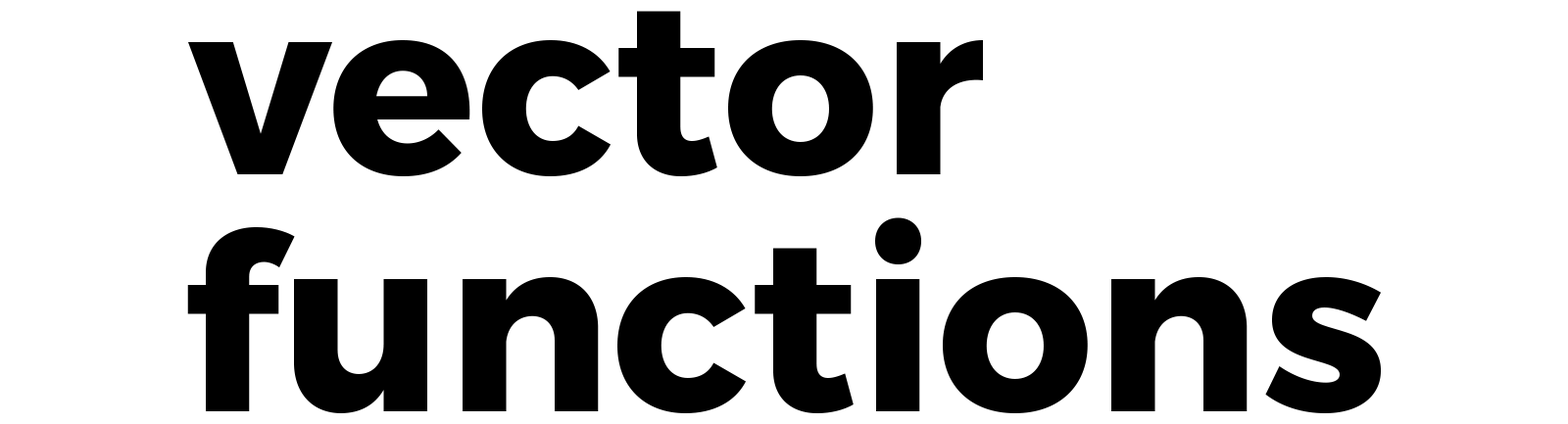
<style>
.page{position:relative;width:1568px;height:424px;background:#ffffff}
.page>*{position:absolute;margin:0}
.t1{font:245px "Montserrat-Bold";letter-spacing:0.005em;color:#000000}
</style>
<div class="page">
<p class="t1" style="left:188px;top:11px;width:795px;height:165px">vector</p>
<p class="t1" style="left:187px;top:218px;width:1194px;height:196px">functions</p>
</div>
